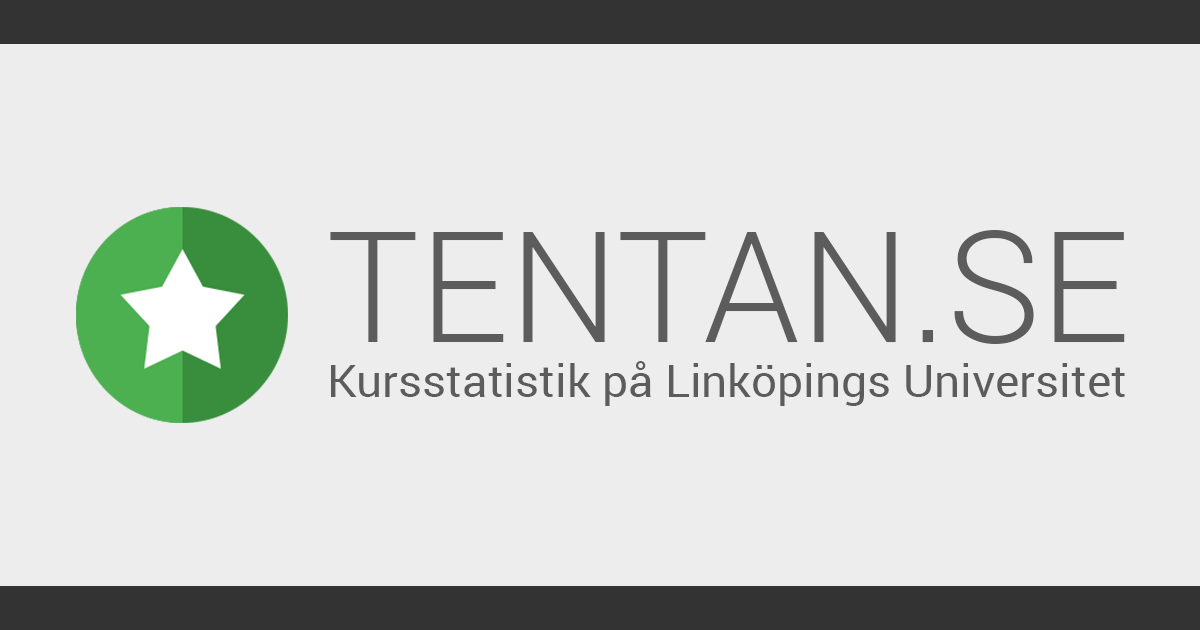
<style>
.page{position:relative;width:1200px;height:630px;background:#ededed}
.page>*{position:absolute;margin:0}
.t1{font:155.4px "Roboto-Light";color:#5c5c5c}
.t2{font:45.3px "Roboto-Regular";color:#5c5c5c}
</style>
<div class="page">
<p class="t1" style="left:330px;top:230px;width:795px;height:114px">TENTAN.SE</p>
<p class="t2" style="left:331px;top:361px;width:794px;height:45px">Kursstatistik på Linköpings Universitet</p>
</div>
